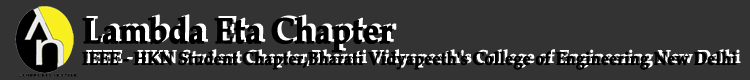
<style>
.page{position:relative;width:750px;height:80px;background:#333333}
.page>*{position:absolute;margin:0}
.t1{font:18px "BookAntiqua-Bold";font-weight:bold;scale:0.88 1}
.t2{font:36px "BookAntiqua-Bold";font-weight:bold;scale:0.88 1}
</style>
<div class="page">
<p class="t1" style="left:86px;top:14px;width:655px;height:54px"><span class="t2">Lambda Eta Chapter<br></span>IEEE - HKN Student Chapter,Bharati Vidyapeeth's College of Engineering New Delhi</p>
</div>
